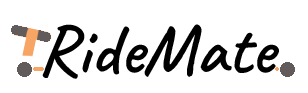
<style>
.page{position:relative;width:308px;height:93px;background:#ffffff}
.page>*{position:absolute;margin:0}
.t1{font:72px "Caveat-SemiBold";color:#000000}
</style>
<div class="page">
<p class="t1" style="left:42px;top:24px;width:237px;height:55px">RideMate</p>
</div>
